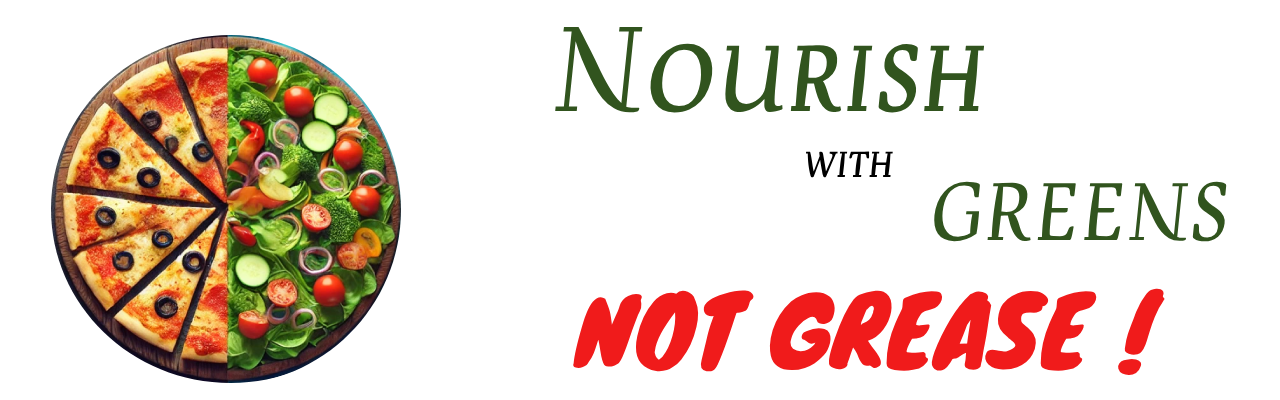
<style>
.page{position:relative;width:1280px;height:400px;background:#ffffff}
.page>*{position:absolute;margin:0}
.t1{font:111px "DevroyeSCOSF";color:#31541e}
.t2{font:43px "DevroyeSCOSF";color:#000000}
.t3{font:75px "DevroyeSCOSF";color:#31541e}
.t4{font:94px "Knewave-Regular";color:#f01b1b}
</style>
<div class="page">
<p class="t1" style="left:555px;top:27px;width:430px;height:86px">Nourish</p>
<p class="t2" style="left:805px;top:151px;width:88px;height:27px">with</p>
<p class="t3" style="left:933px;top:181px;width:294px;height:61px">GREENS</p>
<p class="t4" style="left:572px;top:288px;width:593px;height:88px">NOT GREASE !</p>
</div>
